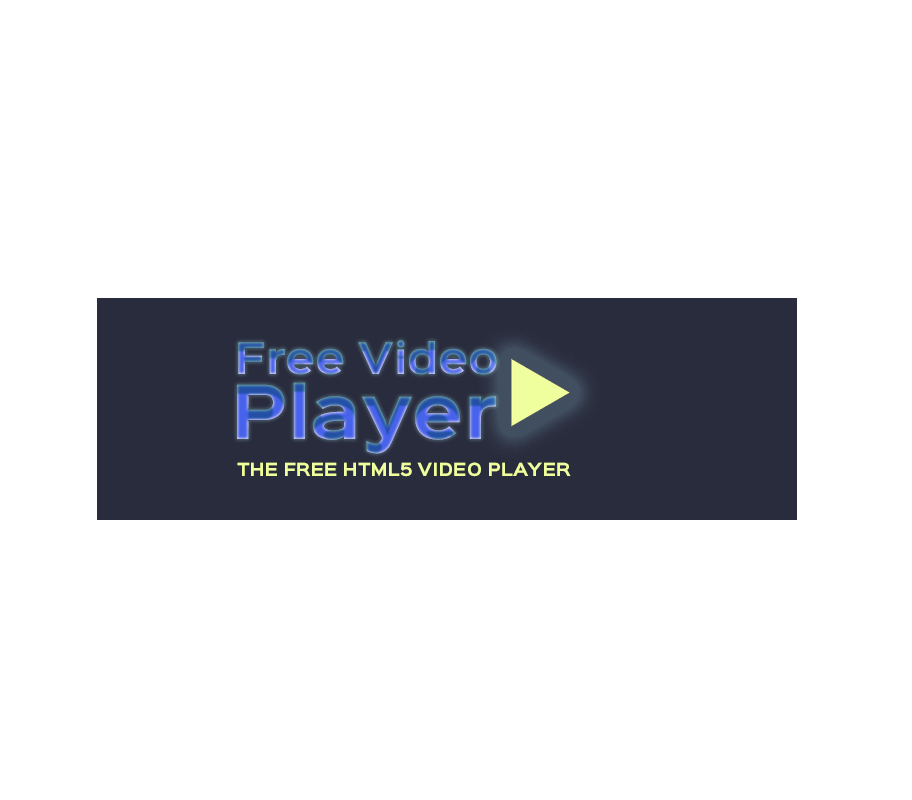
<style>
.page{position:relative;width:912px;height:800px;background:#ffffff}
.page>*{position:absolute;margin:0}
.t1{font:39.3px "SinkinSans-700Bold"}
.t2{font:67px "SinkinSans-700Bold"}
.t3{font:16.4px "SinkinSans-700Bold";color:#f0ff9d}
</style>
<div class="page">
<p class="t1" style="left:238px;top:340px;width:259px;height:35px">Free Video</p>
<p class="t2" style="left:237px;top:382px;width:259px;height:72px">Player</p>
<p class="t3" style="left:237px;top:462px;width:334px;height:15px">THE FREE HTML5 VIDEO PLAYER</p>
</div>
